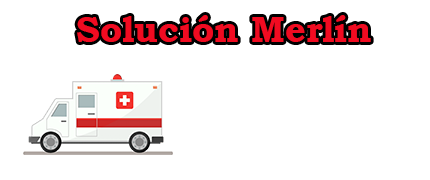
<style>
.page{position:relative;width:430px;height:180px;background:#ffffff}
.page>*{position:absolute;margin:0}
.t1{font:36px "BookmanOldStyle-Bold";color:#f10b21}
</style>
<div class="page">
<p class="t1" style="left:77px;top:15px;width:294px;height:27px">Solución Merlín</p>
</div>
